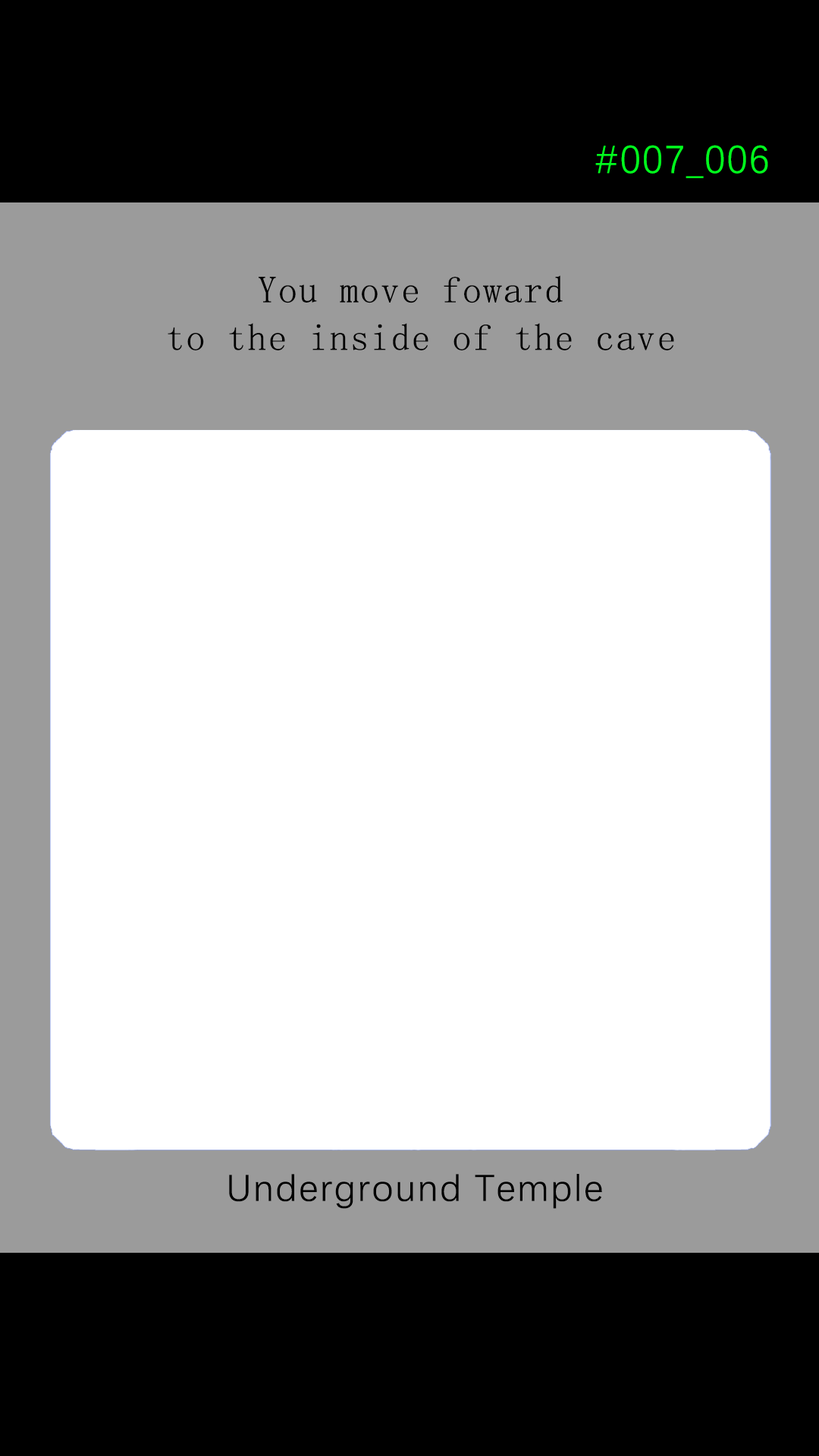
<style>
.page{position:relative;width:819px;height:1456px;background:#ffffff}
.page>*{position:absolute;margin:0}
.t1{font:39.2px "DengXian-Regular";letter-spacing:0.04em;color:#00ff1e}
.t2{font:37.9px/47.6px "SimSun";letter-spacing:0.04em;color:#000000}
.t3{font:37.9px "DengXian-Regular";letter-spacing:0.04em;color:#000000}
</style>
<div class="page">
<p class="t1" style="left:595px;top:145px;width:173px;height:33px">#007_006</p>
<p class="t2" style="left:168px;top:275px;width:506px;height:75px;text-align:center">You move foward <br>to the inside of the cave</p>
<p class="t3" style="left:229px;top:1174px;width:373px;height:35px">Underground Temple</p>
</div>
